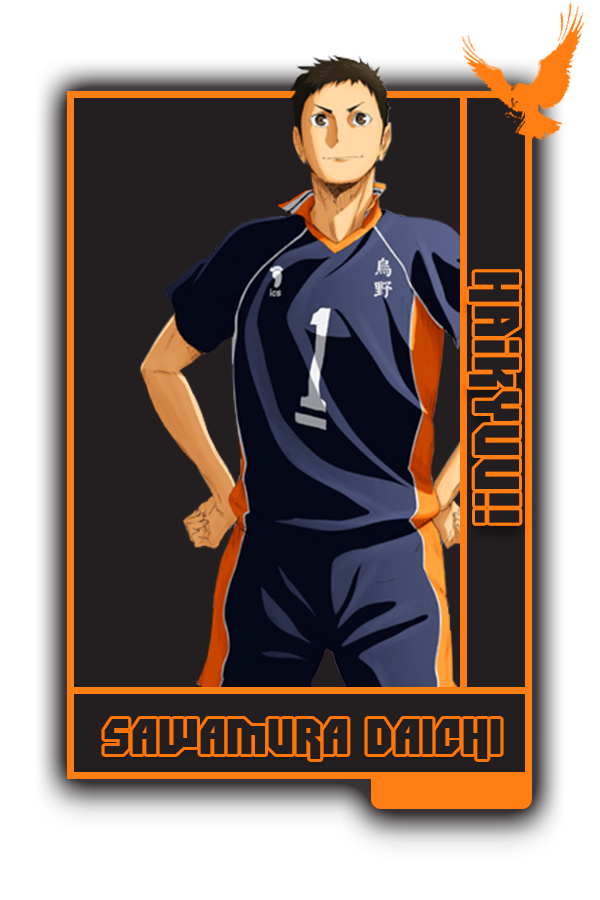
<style>
.page{position:relative;width:600px;height:900px;background:#231e1f}
.page>*{position:absolute;margin:0}
.t1{font:62.9px "Dimitri";color:#231f20}
.t2{font:50.5px "Dimitri";color:#231f20}
</style>
<div class="page">
<p class="t1" style="left:469px;top:272px;width:51px;height:251px;rotate:90deg">Haikyuu!!</p>
<p class="t2" style="left:104px;top:719px;width:397px;height:40px">SAWAMURA DAICHI</p>
</div>
